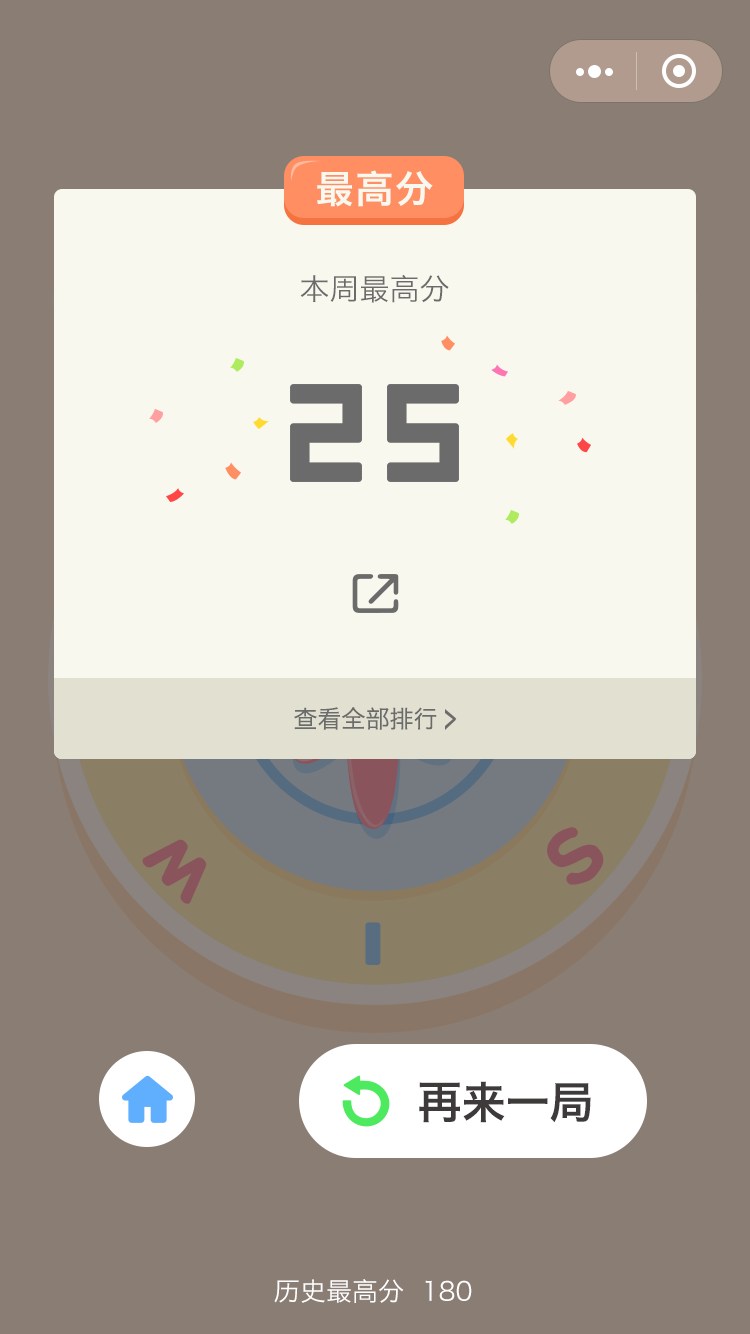
<style>
.page{position:relative;width:750px;height:1334px;background:#8a7d74}
.page>*{position:absolute;margin:0}
.t1{font:38px "HiraginoSansGB-W6";letter-spacing:0.05em;color:#f8f8ee}
.t2{font:30px "HiraginoSansGB-W3";color:#6b6b6b}
.t3{font:24px "HiraginoSansGB-W3";color:#6b6b6b}
.t4{font:64.4px "DFPYuanW9";color:#8a545d;scale:1.31 1}
.t5{font:44px "HiraginoSansGB-W6";color:#3e3a3a}
.t6{font:26px "HiraginoSansGB-W3";color:#ffffff}
</style>
<div class="page">
<p class="t1" style="left:317px;top:170px;width:116px;height:37px">最高分</p>
<p class="t2" style="left:300px;top:274px;width:149px;height:29px">本周最高分</p>
<p class="t3" style="left:294px;top:707px;width:143px;height:23px">查看全部排行</p>
<p class="t4" style="left:142px;top:839px;width:65px;height:65px;rotate:-136deg">W</p>
<p class="t5" style="left:419px;top:1081px;width:172px;height:42px">再来一局</p>
<p class="t6" style="left:274px;top:1279px;width:198px;height:24px">历史最高分  180</p>
</div>
